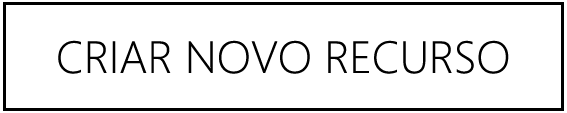
<style>
.page{position:relative;width:567px;height:113px;background:#ffffff}
.page>*{position:absolute;margin:0}
.t1{font:45px "SegoeUI-Light";color:#000000}
</style>
<div class="page">
<p class="t1" style="left:58px;top:40px;width:451px;height:34px">CRIAR NOVO RECURSO</p>
</div>
